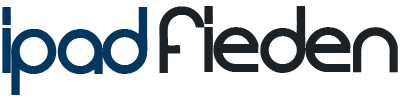
<style>
.page{position:relative;width:400px;height:100px;background:#ffffff}
.page>*{position:absolute;margin:0}
.t1{font:90px "Evolution";color:#1c2125}
.t2{font:90px "Evolution";color:#04375f}
</style>
<div class="page">
<p class="t1" style="left:159px;top:6px;width:239px;height:67px">fieden</p>
<p class="t2" style="left:2px;top:7px;width:146px;height:88px">Ipad</p>
</div>
